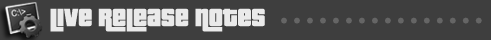
<style>
.page{position:relative;width:491px;height:40px;background:#3e3e3e}
.page>*{position:absolute;margin:0}
.t1{font:27px "PricedownBl-Regular";color:#eaeaea}
</style>
<div class="page">
<p class="t1" style="left:50px;top:8px;width:215px;height:24px">live release notes</p>
</div>
